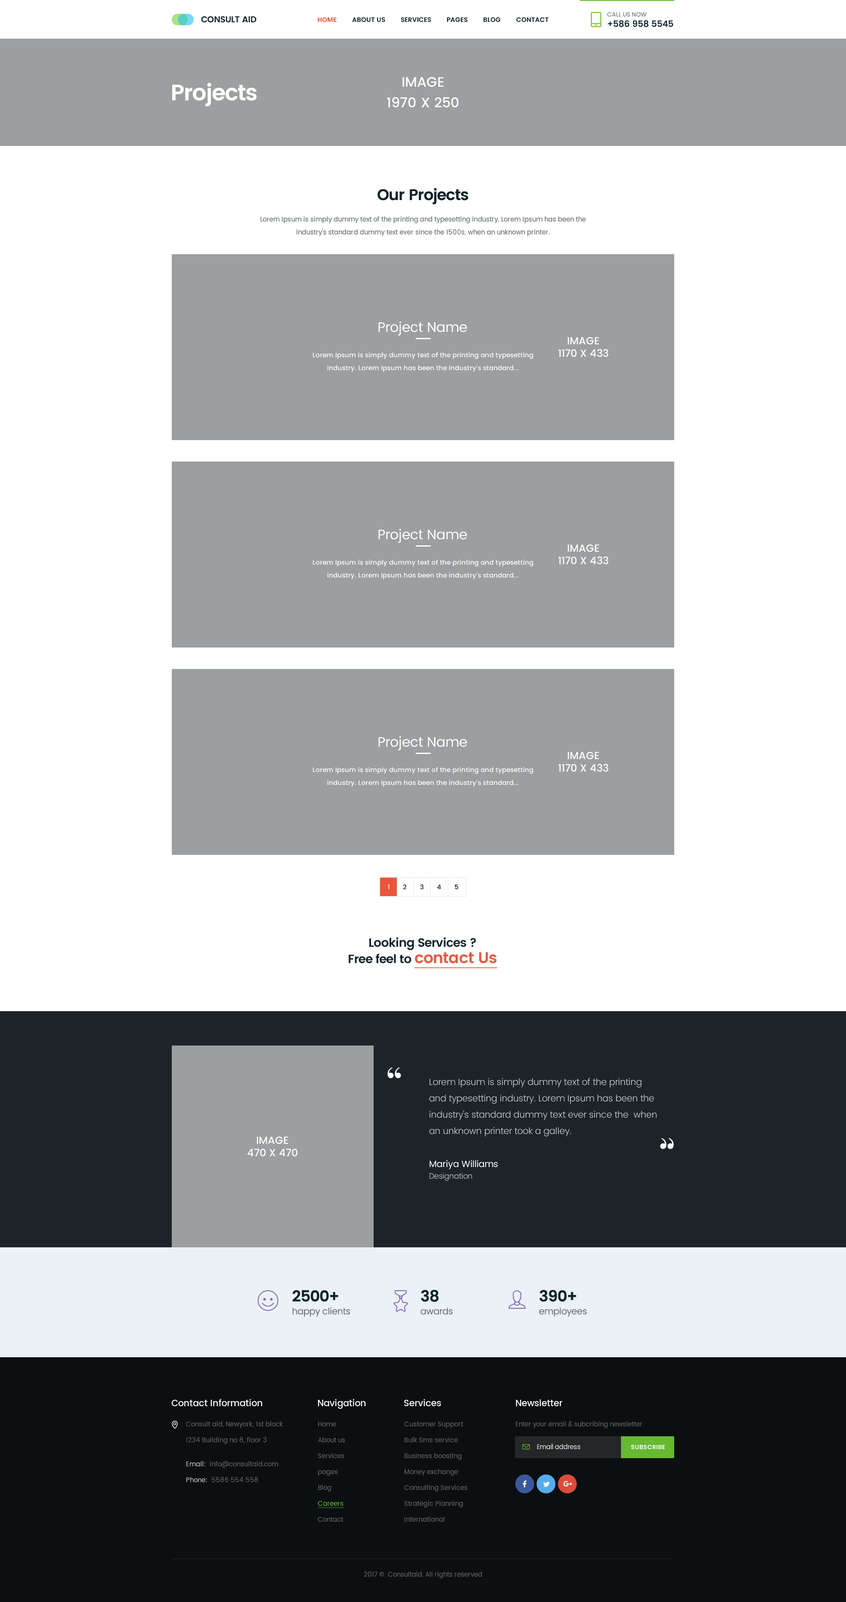
<style>
.page{position:relative;width:846px;height:1602px;background:#ffffff}
.page>*{position:absolute;margin:0}
.t1{font:6.4px "Poppins-SemiBold";color:#10242b;text-transform:uppercase}
.t2{font:6.4px "Poppins-SemiBold";color:#e9563d;text-transform:uppercase}
.t3{font:8.6px "Poppins-Medium";letter-spacing:-0.005em;color:#10242b;text-transform:uppercase}
.t4{font:6px "Poppins-Regular";letter-spacing:-0.005em;color:#718389;text-transform:uppercase}
.t5{font:13.7px/20.6px "Poppins-Medium";color:#ffffff;text-transform:uppercase}
.t6{font:22.4px "Poppins-SemiBold";letter-spacing:-0.03em;color:#ffffff}
.t7{font:15.5px "Poppins-SemiBold";letter-spacing:-0.03em;color:#10242b}
.t8{font:6.4px/12.9px "Poppins-Regular";letter-spacing:0.01em;color:#5c666a}
.t9{font:13.7px "Poppins-Regular";letter-spacing:-0.01em;color:#ffffff}
.t10{font:10.3px "Poppins-Medium";color:#ffffff;text-transform:uppercase}
.t11{font:6.4px/12.9px "Poppins-Medium";letter-spacing:0.01em;color:#ffffff}
.t12{font:6.4px "Poppins-Medium";letter-spacing:-0.01em;color:#10242b}
.t13{font:6.4px "Poppins-Medium";letter-spacing:-0.01em;color:#ffffff}
.t14{font:12px/16.3px "Poppins-SemiBold";letter-spacing:-0.025em;color:#10242b}
.t15{font:11.6px/16.3px "Poppins-SemiBold";letter-spacing:-0.025em;color:#10242b}
.t16{font:15.5px/16.3px "Poppins-SemiBold";letter-spacing:-0.025em;color:#e9563d;text-decoration:underline}
.t17{font:42.9px "PlayfairDisplay-Regular";letter-spacing:-0.01em;color:#ffffff}
.t18{font:9px/16.3px "Poppins-Light";letter-spacing:-0.01em;color:#cdd3d8}
.t19{font:43.1px "PlayfairDisplay-Regular";letter-spacing:-0.01em;color:#ffffff}
.t20{font:9px "Poppins-Regular";letter-spacing:-0.01em;color:#ffffff}
.t21{font:7.7px "Poppins-Light";letter-spacing:-0.01em;color:#cdd3d8}
.t22{font:9px/12.8px "Poppins-Light";letter-spacing:-0.01em;color:#5c666a}
.t23{font:15.4px/12.8px "Poppins-SemiBold";letter-spacing:-0.03em;color:#10242b}
.t24{font:9px "Poppins-Medium";letter-spacing:-0.01em;color:#ffffff}
.t25{font:6.4px/15.9px "Poppins-Regular";letter-spacing:0.01em;color:#64676a}
.t26{font:6.4px/15.9px "Poppins-Regular";color:#64676a}
.t27{font:6.4px/15.9px "Poppins-Regular";color:#67b930;text-decoration:underline}
.t28{font:6.4px "Poppins-Regular";color:#64676a}
.t29{font:6.2px "Poppins-Regular";color:#ececec}
.t30{font:6px "Poppins-SemiBold";letter-spacing:0.025em;color:#ffffff;text-transform:uppercase}
.t31{font:6.4px/15.9px "Poppins-Regular";letter-spacing:0.01em;color:#c5c5c5}
.t32{font:6.4px/15.9px "Poppins-Regular";letter-spacing:0.01em;color:#c4c4c4}
</style>
<div class="page">
<p class="t1" style="left:318px;top:17px;width:231px;height:5px"><span class="t2">Home</span>         about us         services         Pages         blog         contact</p>
<p class="t3" style="left:607px;top:12px;width:66px;height:15px"><span class="t4">Call us now<br></span>+586 958 5545</p>
<p class="t5" style="left:387px;top:77px;width:72px;height:30px;text-align:center">Image<br>1970 x 250</p>
<p class="t6" style="left:172px;top:82px;width:85px;height:24px">Projects</p>
<p class="t7" style="left:377px;top:188px;width:91px;height:16px">Our Projects</p>
<p class="t8" style="left:260px;top:216px;width:326px;height:20px;text-align:center">Lorem Ipsum is simply dummy text of the printing and typesetting industry. Lorem Ipsum has been the industry's standard dummy text ever since the 1500s, when an unknown printer.</p>
<p class="t9" style="left:378px;top:321px;width:89px;height:15px">Project Name</p>
<p class="t10" style="left:558px;top:337px;width:50px;height:20px;text-align:center">Image<br>1170 x 433</p>
<p class="t11" style="left:313px;top:352px;width:220px;height:20px;text-align:center">Lorem Ipsum is simply dummy text of the printing and typesetting industry. Lorem Ipsum has been the industry's standard...</p>
<p class="t9" style="left:378px;top:529px;width:89px;height:14px">Project Name</p>
<p class="t10" style="left:558px;top:544px;width:50px;height:20px;text-align:center">Image<br>1170 x 433</p>
<p class="t11" style="left:313px;top:559px;width:220px;height:20px;text-align:center">Lorem Ipsum is simply dummy text of the printing and typesetting industry. Lorem Ipsum has been the industry's standard...</p>
<p class="t9" style="left:378px;top:736px;width:89px;height:15px">Project Name</p>
<p class="t10" style="left:558px;top:752px;width:50px;height:20px;text-align:center">Image<br>1170 x 433</p>
<p class="t11" style="left:313px;top:767px;width:220px;height:20px;text-align:center">Lorem Ipsum is simply dummy text of the printing and typesetting industry. Lorem Ipsum has been the industry's standard...</p>
<p class="t12" style="left:388px;top:884px;width:70px;height:5px"><span class="t13">1</span>        2        3        4        5</p>
<p class="t14" style="left:349px;top:937px;width:148px;height:31px;text-align:center">Looking Services<span class="t15"> ?<br></span>Free feel to <span class="t16">contact Us</span></p>
<p class="t17" style="left:387px;top:1067px;width:14px;height:11px">“</p>
<p class="t18" style="left:429px;top:1078px;width:228px;height:59px">Lorem Ipsum is simply dummy text of the printing and typesetting industry. Lorem Ipsum has been the industry's standard dummy text ever since the  when an unknown printer took a galley.</p>
<p class="t10" style="left:247px;top:1137px;width:51px;height:19px;text-align:center">Image<br>470 x 470</p>
<p class="t19" style="left:660px;top:1138px;width:14px;height:11px;rotate:180deg">“</p>
<p class="t20" style="left:429px;top:1160px;width:69px;height:10px">Mariya Williams</p>
<p class="t21" style="left:429px;top:1173px;width:43px;height:8px">Designation</p>
<p class="t22" style="left:292px;top:1290px;width:58px;height:27px"><span class="t23">2500+<br></span>happy clients</p>
<p class="t22" style="left:420px;top:1290px;width:33px;height:25px"><span class="t23">38<br></span>awards</p>
<p class="t22" style="left:539px;top:1290px;width:48px;height:27px"><span class="t23">390+<br></span>employees</p>
<p class="t24" style="left:171px;top:1399px;width:91px;height:7px">Contact Information</p>
<p class="t24" style="left:318px;top:1399px;width:48px;height:10px">Navigation</p>
<p class="t24" style="left:404px;top:1399px;width:37px;height:7px">Services</p>
<p class="t24" style="left:516px;top:1399px;width:46px;height:7px">Newsletter</p>
<p class="t25" style="left:186px;top:1421px;width:97px;height:23px">Consult aid, Newyork, 1st block <br>1234 Building no 8, floor 3</p>
<p class="t26" style="left:318px;top:1422px;width:27px;height:100px">Home<br>About us<br>Services<br>pages<br>Blog<br><span class="t27">Careers<br></span>Contact</p>
<p class="t25" style="left:404px;top:1422px;width:63px;height:100px">Customer Support<br>Bulk Sms service<br>Business boosting<br>Money exchange<br>Consulting Services<br>Strategic Planning<br>International</p>
<p class="t28" style="left:516px;top:1421px;width:126px;height:7px">Enter your email &amp; subcribing newsletter</p>
<p class="t29" style="left:537px;top:1444px;width:44px;height:5px">Email address</p>
<p class="t30" style="left:631px;top:1445px;width:34px;height:4px">Subscribe</p>
<p class="t25" style="left:186px;top:1461px;width:92px;height:21px"><span class="t31">Email:</span>  info@consultaid.com<br><span class="t32">Phone:</span>  5586 554 558</p>
<p class="t28" style="left:364px;top:1571px;width:118px;height:7px">2017 ©  Consultaid. All rights reserved</p>
</div>
